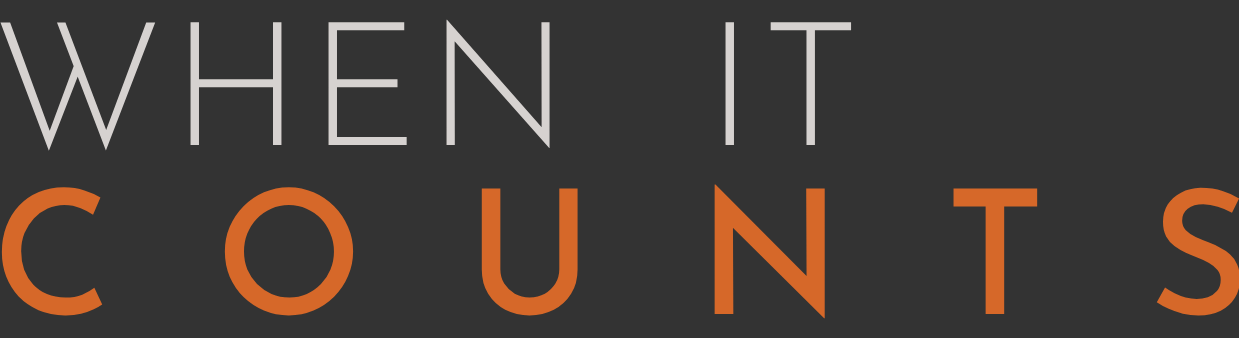
<style>
.page{position:relative;width:1239px;height:338px;background:#333333}
.page>*{position:absolute;margin:0}
.t1{font:172.9px "JosefinSansRoman-Regular_299.000wght";letter-spacing:0.044em;color:#d6d2d0}
.t2{font:172.9px "JosefinSansRoman-Regular_507.000wght";letter-spacing:0.596em;color:#d66829}
</style>
<div class="page">
<p class="t1" style="left:0px;top:19px;width:1240px;height:300px">WHEN  IT<br><span class="t2">COUNTS</span></p>
</div>
